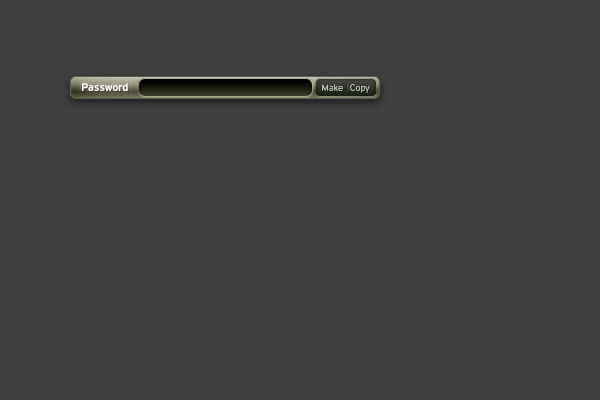
<style>
.page{position:relative;width:600px;height:400px;background:#3f3f3f}
.page>*{position:absolute;margin:0}
.t1{font:11px "Interstate-Bold";letter-spacing:-0.025em;color:#ffffff}
.t2{font:9px "Interstate-Light";color:#b6b7b4}
</style>
<div class="page">
<p class="t1" style="left:82px;top:83px;width:46px;height:8px">Password</p>
<p class="t2" style="left:322px;top:84px;width:48px;height:9px">Make   Copy</p>
</div>
